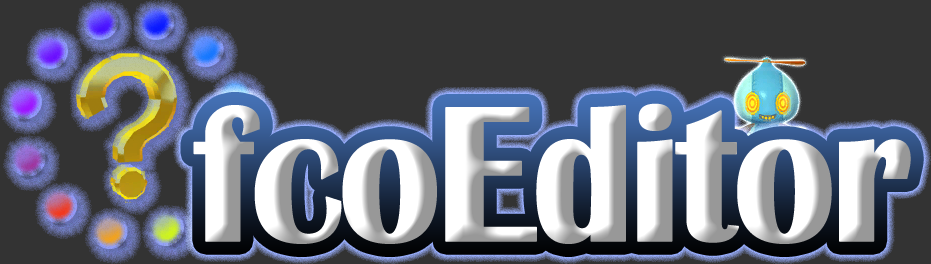
<style>
.page{position:relative;width:931px;height:264px;background:#333333}
.page>*{position:absolute;margin:0}
.t1{font:200px "BritannicBold";letter-spacing:-0.05em;font-weight:bold;scale:0.95 1}
</style>
<div class="page">
<p class="t1" style="left:193px;top:103px;width:718px;height:141px">fcoEditor</p>
</div>
